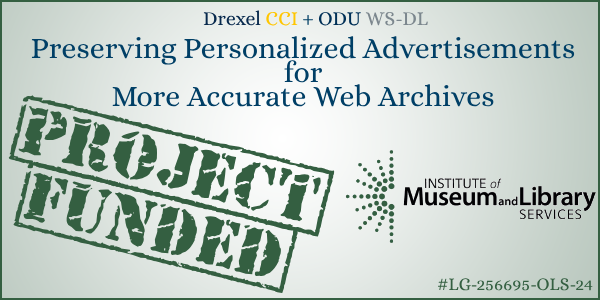
<style>
.page{position:relative;width:600px;height:300px}
.page>*{position:absolute;margin:0}
.t1{font:20px "Alice-Regular";color:#07294d}
.t2{font:20px "Alice-Regular";color:#ffc600}
.t3{font:20px "Alice-Regular";color:#003f66}
.t4{font:20px "Alice-Regular";color:#003057}
.t5{font:20px "Alice-Regular";color:#7c878e}
.t6{font:30px/24px "Alice-Regular";color:#003f66}
.t7{font:68.6px/63.5px "OldStamper";color:#345f41}
.t8{font:18px "Alice-Regular";color:#345f41}
</style>
<div class="page">
<p class="t1" style="left:203px;top:10px;width:225px;height:16px">Drexel <span class="t2">CCI </span><span class="t3">+ </span><span class="t4">ODU </span><span class="t5">WS-DL</span></p>
<p class="t6" style="left:31px;top:36px;width:544px;height:71px;text-align:center">Preserving Personalized Advertisements<br>for<br>More Accurate Web Archives</p>
<p class="t7" style="left:8px;top:95px;width:327px;height:198px;text-align:center;rotate:14deg">[PROJECT]<br>[FUNDED]</p>
<p class="t8" style="left:438px;top:278px;width:155px;height:13px">#LG-256695-OLS-24</p>
</div>
